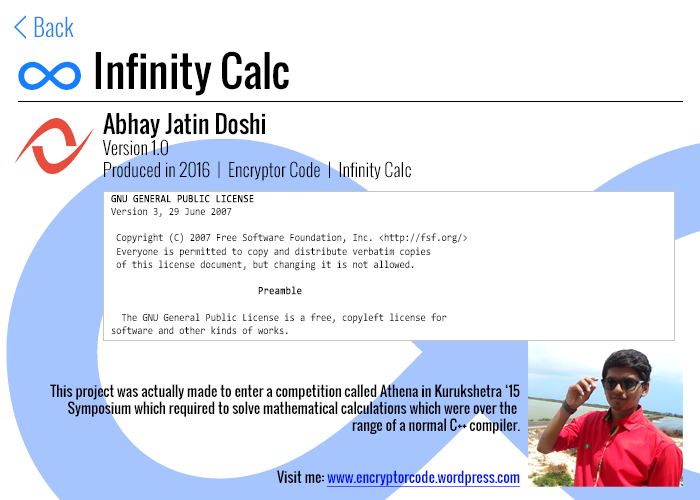
<style>
.page{position:relative;width:700px;height:500px;background:#ffffff}
.page>*{position:absolute;margin:0}
.t1{font:24px "Oswald-Light";color:#2984f2}
.t2{font:42px "Oswald-Regular";color:#000000}
.t3{font:95.3px "MyriadPro-Regular";color:#157fff}
.t4{font:18px "Oswald-Light";color:#000000}
.t5{font:24px "Oswald-Regular";color:#000000}
.t6{font:11px "Consolas";color:#000000;scale:0.87 1}
.t7{font:11px "Consolas";color:#000000;font-weight:bold;scale:0.87 1}
.t8{font:14px "Oswald-Regular";color:#000000}
.t9{font:14px "Oswald-Regular";color:#0012ff;text-decoration:underline}
</style>
<div class="page">
<p class="t1" style="left:34px;top:16px;width:40px;height:22px">Back</p>
<p class="t2" style="left:95px;top:51px;width:194px;height:45px">Infinity Calc</p>
<p class="t3" style="left:18px;top:61px;width:63px;height:29px">∞</p>
<p class="t4" style="left:102px;top:113px;width:309px;height:68px"><span class="t5">Abhay Jatin Doshi<br></span>Version 1.0<br>Produced in 2016  |  Encryptor Code  |  Infinity Calc</p>
<p class="t6" style="left:111px;top:195px;width:356px;height:139px"><span class="t7">GNU GENERAL PUBLIC LICENSE<br></span>Version 3, 29 June 2007<br><br> Copyright (C) 2007 Free Software Foundation, Inc. &lt;http://fsf.org/&gt;<br> Everyone is permitted to copy and distribute verbatim copies<br> of this license document, but changing it is not allowed.<br><br>                            <span class="t7">Preamble<br></span><br>  The GNU General Public License is a free, copyleft license for<br>software and other kinds of works.<br><br>  The licenses for most software and other practical works are designed<br>to take away your freedom to share and change the works.  By contrast,<br>the GNU General Public License is intended to guarantee your freedom to<br>share and change all versions of a program--to make sure it remains free<br>software for all its users.  We, the Free Software Foundation, use the<br>GNU General Public License for most of our software; it applies also to<br>any other work released this way by its authors.  You can apply it to<br>your programs, too.<br><br>  When we speak of free software, we are referring to freedom, not<br>price.  Our General Public Licenses are designed to make sure that you<br>have the freedom to distribute copies of free software (and charge for<br>them if you wish), that you receive source code or can get it if you<br>want it, that you can change the software or use pieces of it in new<br>free programs, and that you know you can do these things.</p>
<p class="t8" style="left:50px;top:384px;width:470px;height:50px;text-align:right">This project was actually made to enter a competition called Athena in Kurukshetra ‘15<br>Symposium which required to solve mathematical calculations which were over the <br>range of a normal C++ compiler.</p>
<p class="t9" style="left:277px;top:470px;width:244px;height:17px"><span class="t8">Visit me: </span>www.encryptorcode.wordpress.com</p>
</div>
